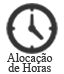
<style>
.page{position:relative;width:64px;height:74px;background:#ffffff}
.page>*{position:absolute;margin:0}
.t1{font:12px/10px "TimesNewRomanPSMT";color:#333333}
</style>
<div class="page">
<p class="t1" style="left:7px;top:53px;width:46px;height:19px;text-align:center">Alocação<br>de Horas</p>
</div>
